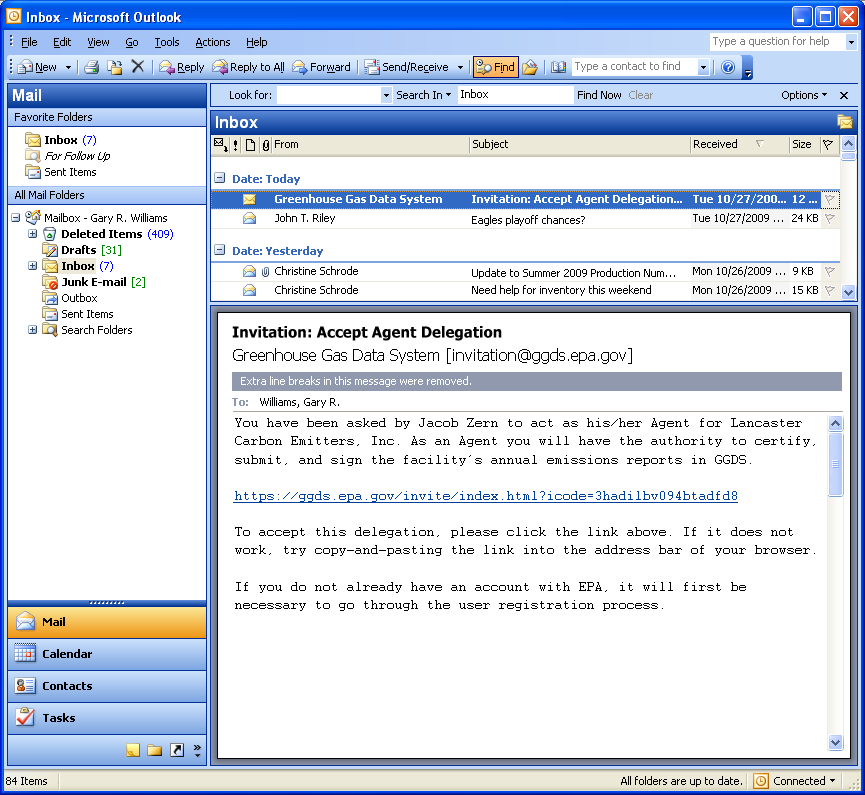
<style>
.page{position:relative;width:865px;height:795px;background:#ffffff}
.page>*{position:absolute;margin:0}
.t1{font:11px "Tahoma-Bold";color:#ffffff}
.t2{font:11px "Tahoma";color:#000000}
.t3{font:15px "Tahoma-Bold";color:#000000}
.t4{font:16px "Tahoma";color:#000000}
.t5{font:11px/18px "Courier";color:#000000}
.t6{font:11px/18px "Courier";color:#003f9c;text-decoration:underline}
</style>
<div class="page">
<p class="t1" style="left:275px;top:194px;width:167px;height:11px">Greenhouse Gas Data System</p>
<p class="t1" style="left:472px;top:194px;width:210px;height:11px">Invitation: Accept Agent Delegation...</p>
<p class="t2" style="left:91px;top:213px;width:76px;height:11px">Gary R. Williams</p>
<p class="t2" style="left:275px;top:213px;width:60px;height:11px">John T. Riley</p>
<p class="t2" style="left:472px;top:215px;width:113px;height:11px">Eagles playoff chances?</p>
<p class="t2" style="left:275px;top:266px;width:83px;height:9px">Christine Schrode</p>
<p class="t2" style="left:472px;top:268px;width:203px;height:11px">Update to Summer 2009 Production Num...</p>
<p class="t2" style="left:275px;top:285px;width:83px;height:9px">Christine Schrode</p>
<p class="t2" style="left:472px;top:285px;width:179px;height:11px">Need help for inventory this weekend</p>
<p class="t3" style="left:232px;top:326px;width:270px;height:15px">Invitation: Accept Agent Delegation</p>
<p class="t4" style="left:233px;top:348px;width:399px;height:16px">Greenhouse Gas Data System [invitation@ggds.epa.gov]</p>
<p class="t2" style="left:260px;top:397px;width:79px;height:11px">Williams, Gary R.</p>
<p class="t5" style="left:233px;top:418px;width:582px;height:193px">You have been asked by Jacob Zern to act as his/her Agent for Lancaster <br>Carbon Emitters, Inc. As an Agent you will have the authority to certify, <br>submit, and sign the facility’s annual emissions reports in GGDS. <br><br><span class="t6">https://ggds.epa.gov/invite/index.html?icode=3hadilbv094btadfd8<br></span><br>To accept this delegation, please click the link above. If it does not<br>work, try copy-and-pasting the link into the address bar of your browser.<br><br>If you do not already have an account with EPA, it will first be<br>necessary to go through the user registration process.</p>
</div>
